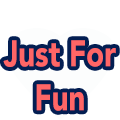
<style>
.page{position:relative;width:120px;height:120px;background:#ffffff}
.page>*{position:absolute;margin:0}
.t1{font:36.6px "Avenir-Black";color:#ff6666;scale:0.8 1}
</style>
<div class="page">
<p class="t1" style="left:3px;top:40px;width:113px;height:71px;text-align:center">Just For<br>Fun</p>
</div>
